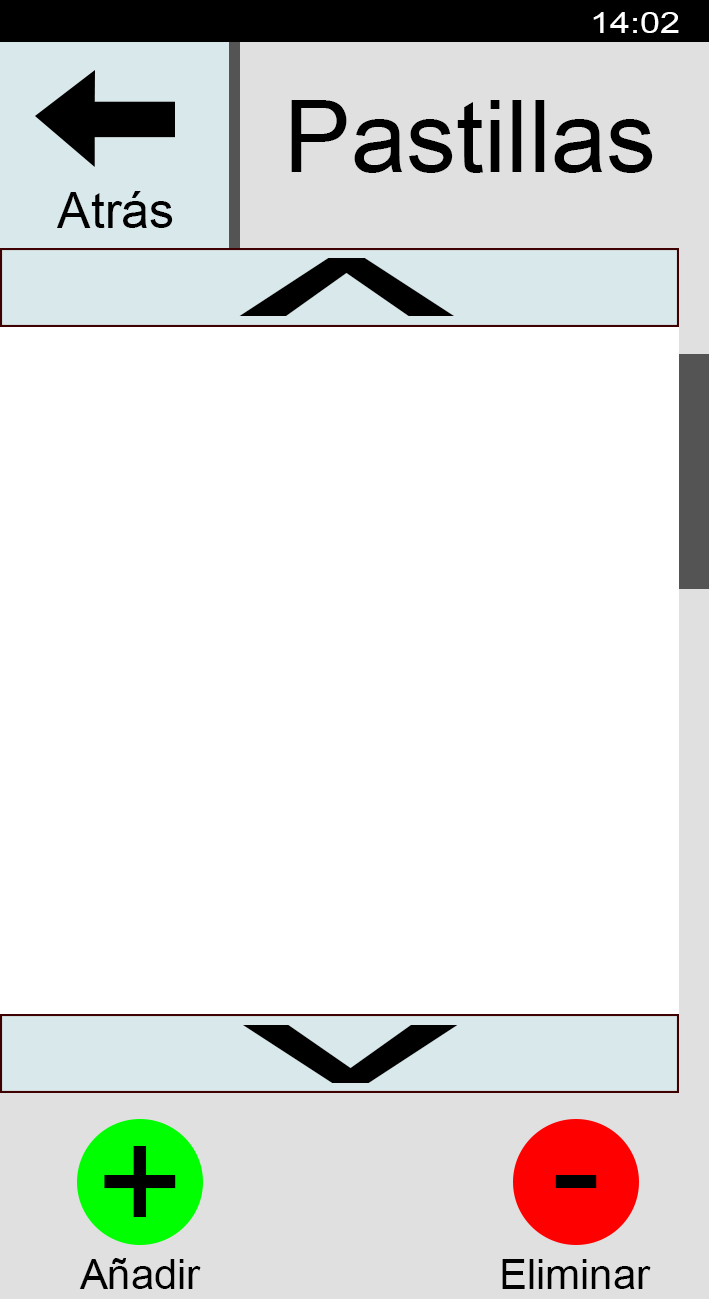
<style>
.page{position:relative;width:709px;height:1299px;background:#ffffff}
.page>*{position:absolute;margin:0}
.t1{font:29.2px "ArialMT";color:#ffffff;scale:1.22 1}
.t2{font:100px "ArialMT";color:#000000}
.t3{font:50px "ArialMT";color:#000000}
.t4{font:150px "ArialMT";color:#000000;scale:3.43 1}
.t5{font:150px "ArialMT";color:#000000}
.t6{font:41.7px "ArialMT";color:#000000}
</style>
<div class="page">
<p class="t1" style="left:593px;top:12px;width:86px;height:21px">14:02</p>
<p class="t2" style="left:291px;top:100px;width:362px;height:73px">Pastillas</p>
<p class="t3" style="left:57px;top:191px;width:116px;height:37px">Atrás</p>
<p class="t4" style="left:239px;top:258px;width:216px;height:58px">^</p>
<p class="t4" style="left:242px;top:1025px;width:216px;height:58px;rotate:180deg">^</p>
<p class="t5" style="left:104px;top:1146px;width:72px;height:71px">+</p>
<p class="t5" style="left:555px;top:1175px;width:42px;height:13px">-</p>
<p class="t6" style="left:79px;top:1258px;width:122px;height:31px">Añadir</p>
<p class="t6" style="left:502px;top:1259px;width:149px;height:30px">Eliminar</p>
</div>
